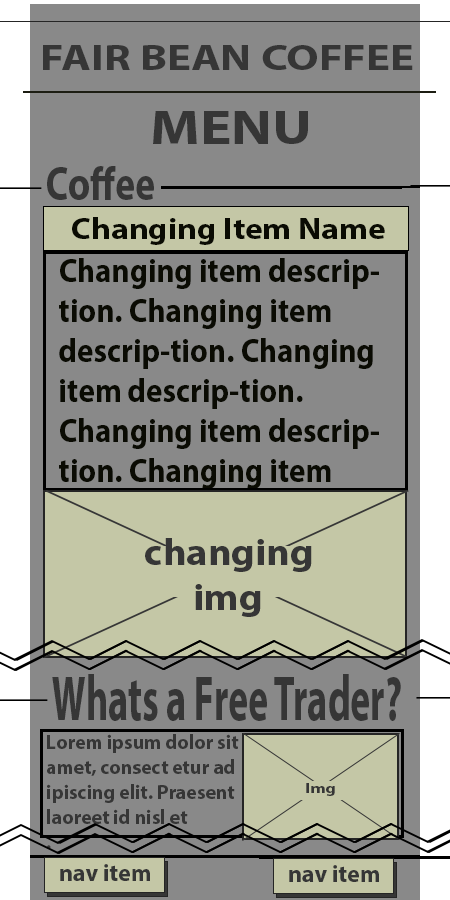
<style>
.page{position:relative;width:450px;height:900px;background:#898989}
.page>*{position:absolute;margin:0}
.t1{font:35.9px "MyriadPro-Bold";color:#363636;scale:1.26 1}
.t2{font:48.4px "MyriadPro-Bold";color:#363636;scale:1.21 1}
.t3{font:47.5px "MyriadPro-Bold";color:#363636;scale:0.8 1}
.t4{font:30px "MyriadPro-Bold";color:#0a0b03;scale:1.12 1}
.t5{font:33.3px "MyriadPro-Bold";color:#0a0b03;scale:0.93 1}
.t6{font:37.5px "MyriadPro-Bold";color:#363636;scale:1.08 1}
.t7{font:63.1px "MyriadPro-Bold";color:#363636;scale:0.61 1}
.t8{font:20.7px "MyriadPro-Bold";color:#363636;scale:0.96 1}
.t9{font:14px "MyriadPro-Bold";color:#363636;scale:1.25 1}
.t10{font:24px "MyriadPro-Bold";color:#363636}
</style>
<div class="page">
<p class="t1" style="left:43px;top:45px;width:370px;height:25px">FAIR BEAN COFFEE</p>
<p class="t2" style="left:153px;top:111px;width:155px;height:33px">MENU</p>
<p class="t3" style="left:47px;top:166px;width:107px;height:34px">Coffee</p>
<p class="t4" style="left:72px;top:217px;width:313px;height:28px">Changing Item Name</p>
<p class="t5" style="left:59px;top:258px;width:320px;height:231px">Changing item descrip-<br>tion. Changing item <br>descrip-tion. Changing <br>item descrip-tion.<br>Changing item descrip-<br>tion. Changing item</p>
<p class="t6" style="left:145px;top:538px;width:167px;height:79px">changing<br> img</p>
<p class="t7" style="left:52px;top:674px;width:349px;height:47px">Whats a Free Trader?</p>
<p class="t8" style="left:47px;top:734px;width:192px;height:115px">Lorem ipsum dolor sit<br>amet, consect etur ad<br>ipiscing elit. Praesent <br>laoreet id nisl et <br>.</p>
<p class="t9" style="left:306px;top:783px;width:29px;height:13px">Img</p>
<p class="t10" style="left:60px;top:864px;width:90px;height:17px">nav item</p>
<p class="t10" style="left:289px;top:865px;width:90px;height:17px">nav item</p>
</div>
